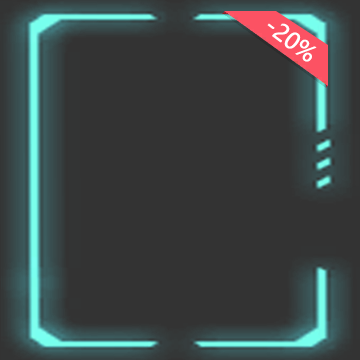
<style>
.page{position:relative;width:360px;height:360px;background:#333333}
.page>*{position:absolute;margin:0}
.t1{font:24px "SegoeUI";color:#ffffff;font-weight:bold}
</style>
<div class="page">
<p class="t1" style="left:267px;top:23px;width:50px;height:39px;rotate:37deg">-20%</p>
</div>
